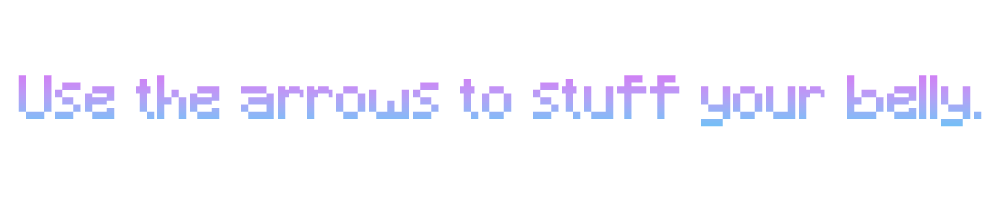
<style>
.page{position:relative;width:1000px;height:200px;background:#ffffff}
.page>*{position:absolute;margin:0}
.t1{font:58.3px "Minecraft"}
</style>
<div class="page">
<p class="t1" style="left:18px;top:75px;width:964px;height:52px">Use the arrows to stuff your belly.</p>
</div>
